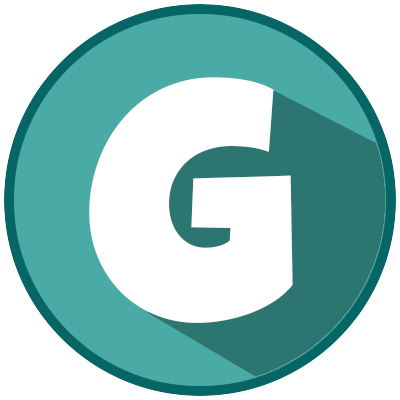
<style>
.page{position:relative;width:400px;height:400px;background:#ffffff}
.page>*{position:absolute;margin:0}
.t1{font:333.3px "LuckiestGuy-Regular";color:#ffffff}
</style>
<div class="page">
<p class="t1" style="left:89px;top:77px;width:204px;height:246px">G</p>
</div>
